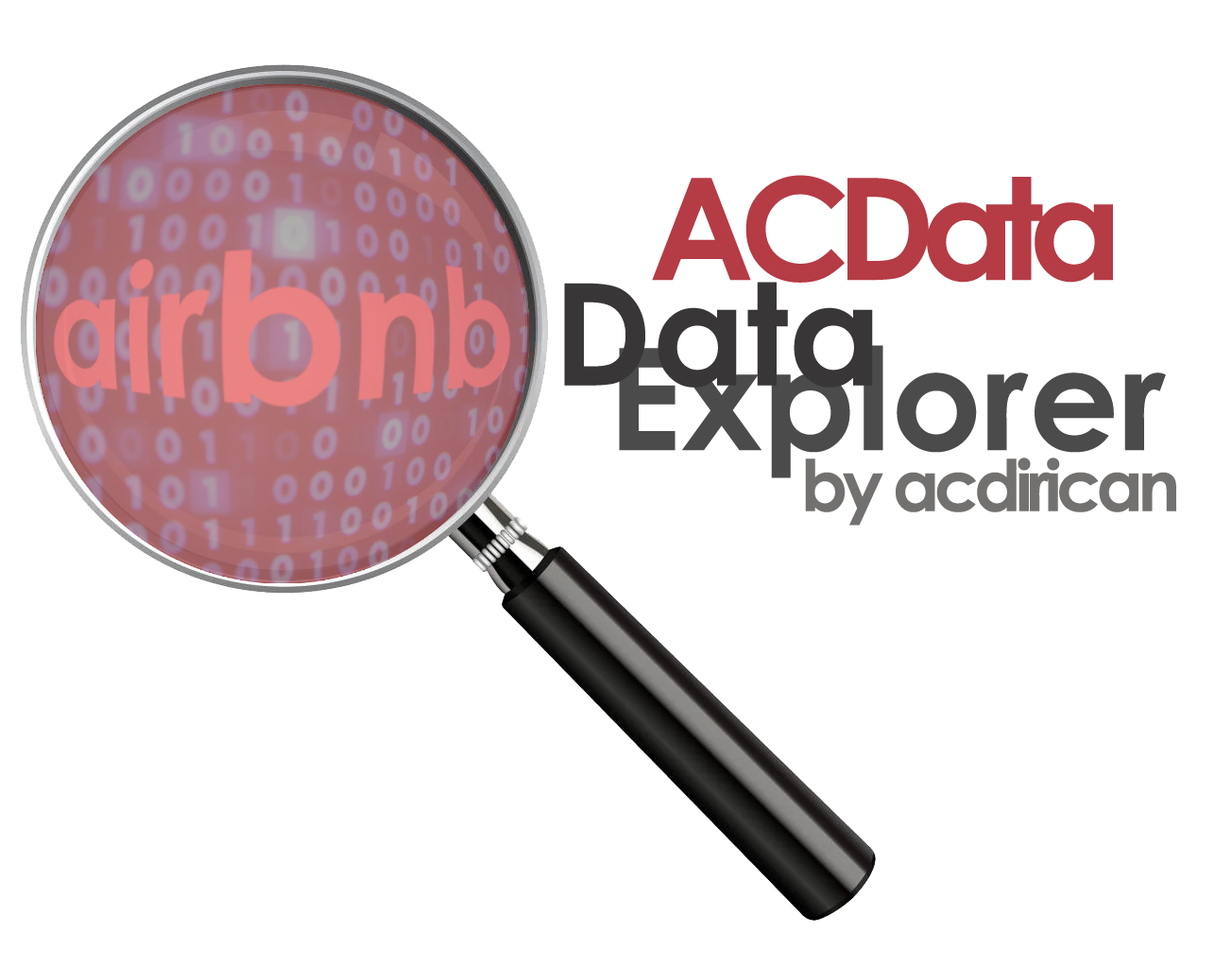
<style>
.page{position:relative;width:1232px;height:968px;background:#ffffff}
.page>*{position:absolute;margin:0}
.t1{font:141.7px "CenturyGothic-Bold";letter-spacing:-0.1em;color:#b53b45}
.t2{font:141.7px "CenturyGothic-Bold";color:#393637}
.t3{font:141.7px "CenturyGothic-Bold";letter-spacing:0.005em;color:#4b4b4b}
.t4{font:70.9px "CenturyGothic-Bold";letter-spacing:-0.075em;color:#737170}
</style>
<div class="page">
<p class="t1" style="left:652px;top:175px;width:461px;height:108px">ACData</p>
<p class="t2" style="left:564px;top:282px;width:309px;height:105px">Data</p>
<p class="t3" style="left:619px;top:345px;width:547px;height:133px">Explorer</p>
<p class="t4" style="left:805px;top:457px;width:372px;height:68px">by acdirican</p>
</div>
